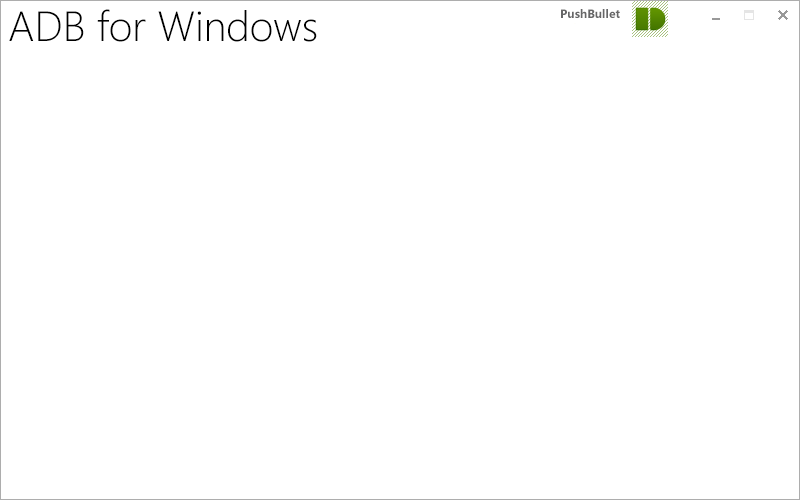
<style>
.page{position:relative;width:800px;height:500px;background:#ffffff}
.page>*{position:absolute;margin:0}
.t1{font:42px "SegoeUI-Light";color:#000000}
.t2{font:12px "SegoeUI-Bold";color:#666667}
</style>
<div class="page">
<p class="t1" style="left:9px;top:9px;width:308px;height:33px">ADB for Windows</p>
<p class="t2" style="left:561px;top:9px;width:59px;height:9px">PushBullet</p>
</div>
